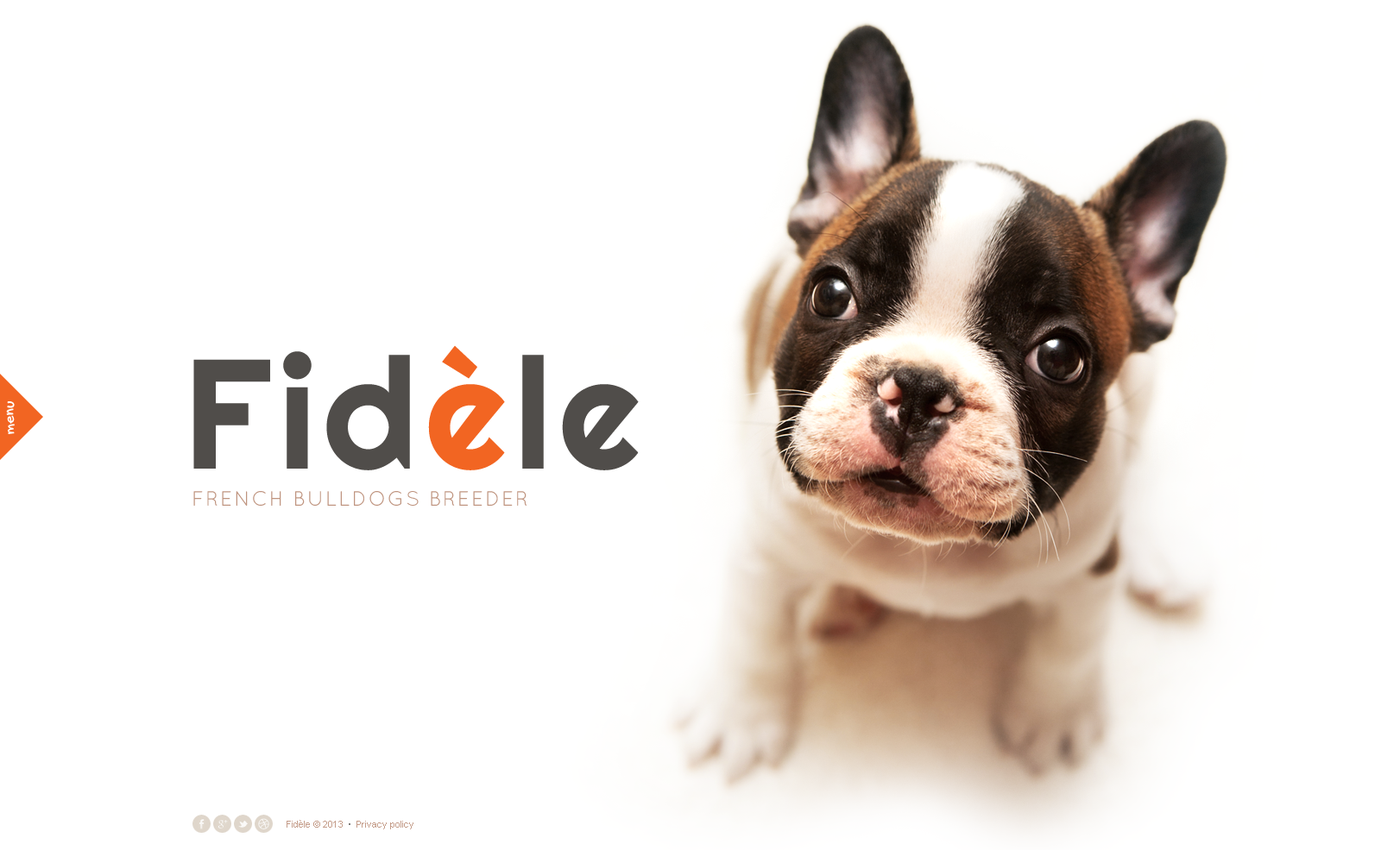
<style>
.page{position:relative;width:1381px;height:863px;background:#ffffff}
.page>*{position:absolute;margin:0}
.t1{font:155.4px "Righteous-Regular";letter-spacing:0.05em;color:#504d4a}
.t2{font:155.4px "Righteous-Regular";letter-spacing:0.05em;color:#f26522}
.t3{font:15.5px "GochiHand-Regular";color:#ffffff}
.t4{font:20.7px "Quicksand-Regular";letter-spacing:0.075em;color:#bf947f;text-transform:uppercase}
.t5{font:9.5px "ArialMT";color:#bf947f}
</style>
<div class="page">
<p class="t1" style="left:193px;top:345px;width:446px;height:125px">Fid<span class="t2">è</span>le</p>
<p class="t3" style="left:6px;top:401px;width:9px;height:33px;rotate:-90deg">menu</p>
<p class="t4" style="left:193px;top:491px;width:334px;height:15px">French Bulldogs Breeder</p>
<p class="t5" style="left:287px;top:820px;width:127px;height:10px;opacity:0.92">Fidèle © 2013     Privacy policy</p>
</div>
